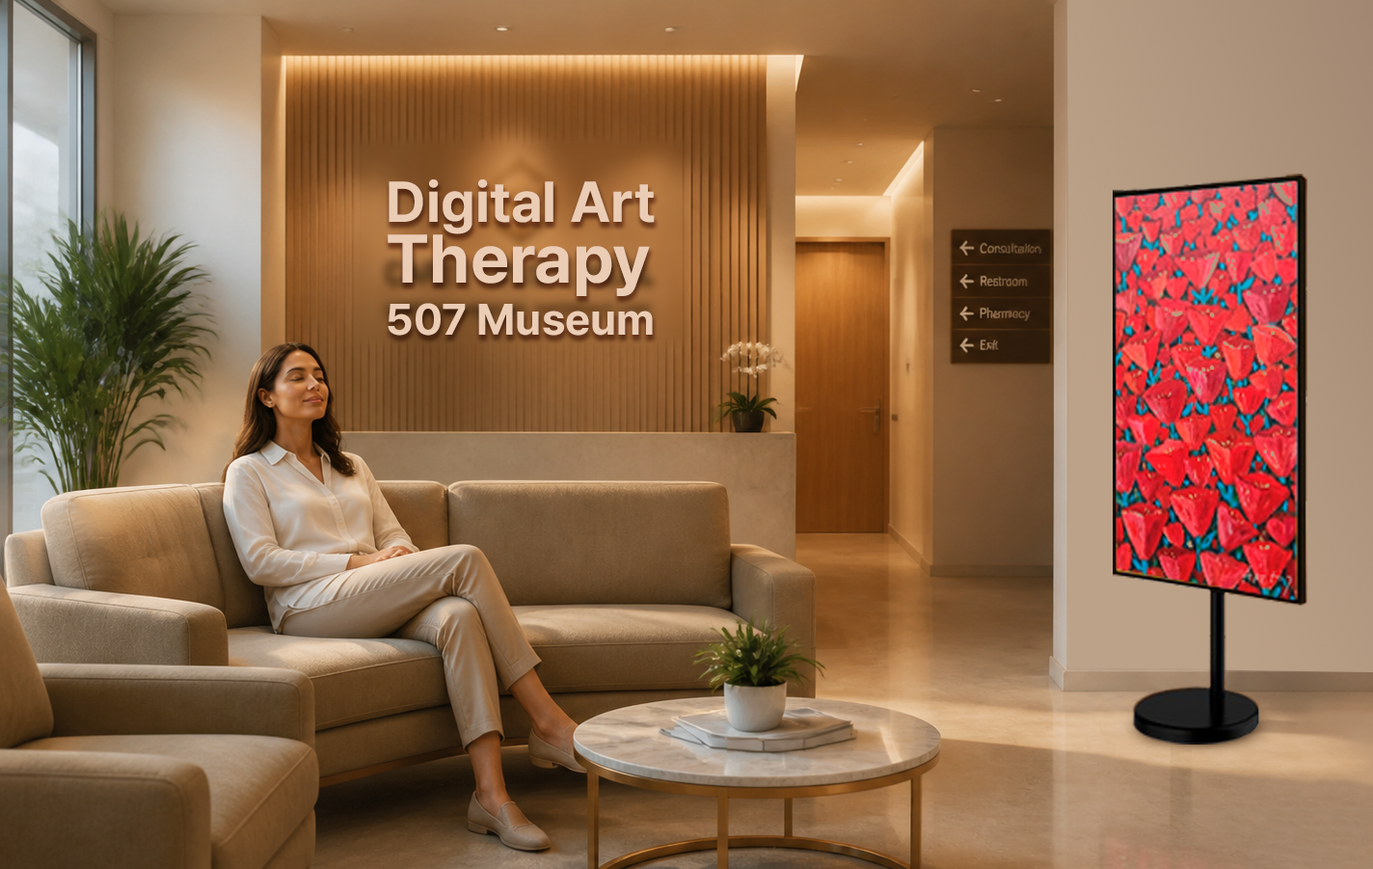
<style>
.page{position:relative;width:1373px;height:869px}
.page>*{position:absolute;margin:0}
.t1{font:56.9px/60.7px "Pretendard-Bold";color:#ebcdb6}
.t2{font:67.9px/60.7px "Pretendard-Bold";color:#ebcdb6}
.t3{font:43.8px "Pretendard-Bold";color:#ebcdb6}
</style>
<div class="page">
<p class="t1" style="left:388px;top:179px;width:267px;height:156px">Digital Art<br><span class="t2">Therapy<br></span><span class="t3">507 Museum</span></p>
</div>
